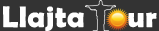
<style>
.page{position:relative;width:159px;height:31px;background:#333333}
.page>*{position:absolute;margin:0}
.t1{font:29.9px "BerlinSansFBDemi-Bold";color:#ffffff;font-weight:bold}
</style>
<div class="page">
<p class="t1" style="left:3px;top:6px;width:154px;height:26px">Llajta   our</p>
</div>
